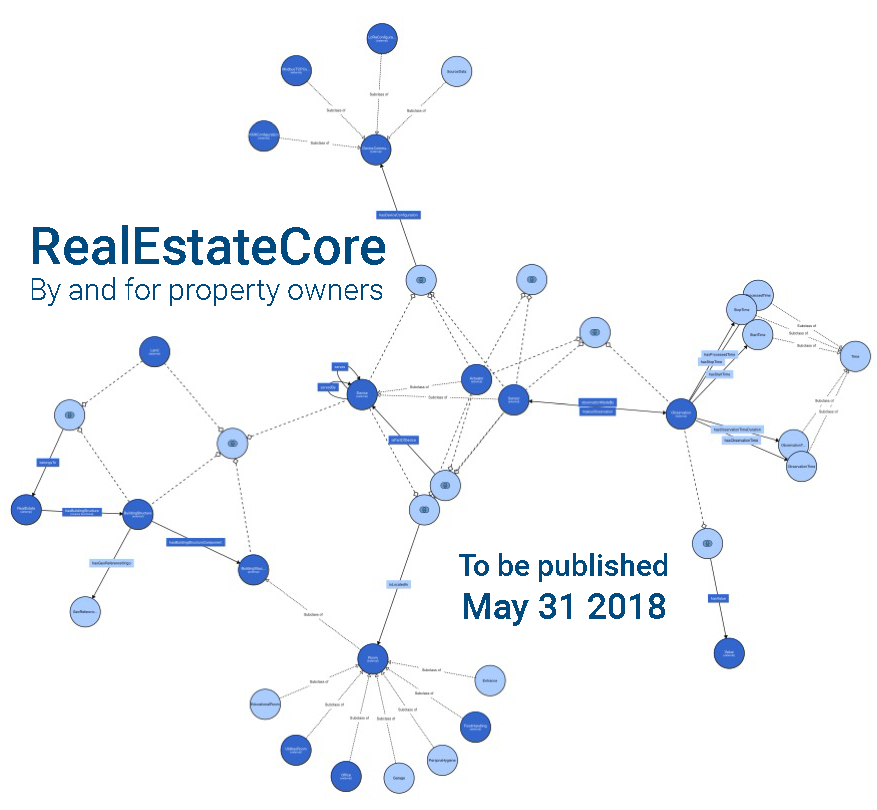
<style>
.page{position:relative;width:877px;height:810px;background:#ffffff}
.page>*{position:absolute;margin:0}
.t1{font:30px "Roboto-Light";color:#004a80}
.t2{font:52px "Roboto-Medium";color:#004a80}
.t3{font:30px "Roboto-Medium";color:#004a80}
.t4{font:36px "Roboto-Medium";color:#004a80}
</style>
<div class="page">
<p class="t1" style="left:32px;top:225px;width:353px;height:81px"><span class="t2">RealEstateCore<br></span>By and for property owners</p>
<p class="t3" style="left:459px;top:553px;width:208px;height:73px;text-align:center">To be published<br><span class="t4">May 31 2018</span></p>
</div>
